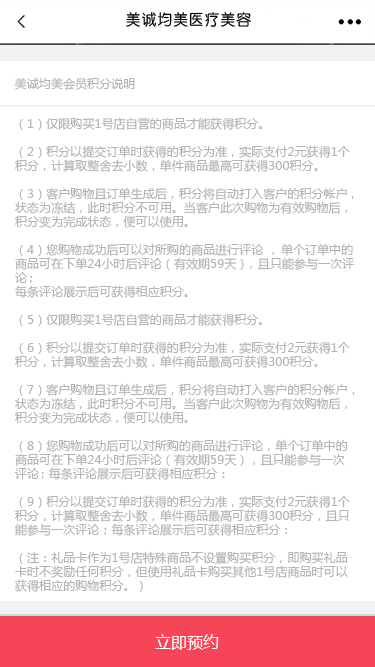
<style>
.page{position:relative;width:375px;height:667px;background:#ffffff}
.page>*{position:absolute;margin:0}
.t1{font:12px "MicrosoftYaHei";letter-spacing:0.005em;color:#b4b4b4}
.t2{font:12px/14px "MicrosoftYaHei";letter-spacing:0.005em;color:#b4b4b4}
.t3{font:16px "MicrosoftYaHei";letter-spacing:0.005em;color:#ffffff}
</style>
<div class="page">
<p class="t1" style="left:14px;top:78px;width:121px;height:12px">美诚均美会员积分说明</p>
<p class="t2" style="left:15px;top:117px;width:340px;height:475px">（1）仅限购买1号店自营的商品才能获得积分。<br> <br>（2）积分以提交订单时获得的积分为准，实际支付2元获得1个<br>积分，计算取整舍去小数，单件商品最高可获得300积分。  <br> <br>（3）客户购物且订单生成后，积分将自动打入客户的积分帐户，<br>状态为冻结，此时积分不可用。当客户此次购物为有效购物后，<br>积分变为完成状态，便可以使用。 <br> <br>（4）您购物成功后可以对所购的商品进行评论，单个订单中的<br>商品可在下单24小时后评论（有效期59天），且只能参与一次评<br>论；<br>每条评论展示后可获得相应积分。<br> <br>（5）仅限购买1号店自营的商品才能获得积分。<br> <br>（6）积分以提交订单时获得的积分为准，实际支付2元获得1个<br>积分，计算取整舍去小数，单件商品最高可获得300积分。  <br><br>（7）客户购物且订单生成后，积分将自动打入客户的积分帐户，<br>状态为冻结，此时积分不可用。当客户此次购物为有效购物后，<br>积分变为完成状态，便可以使用。 <br> <br>（8）您购物成功后可以对所购的商品进行评论，单个订单中的<br>商品可在下单24小时后评论（有效期59天），且只能参与一次<br>评论；每条评论展示后可获得相应积分：<br> <br>（9）积分以提交订单时获得的积分为准，实际支付2元获得1个<br>积分，计算取整舍去小数，单件商品最高可获得300积分，且只<br>能参与一次评论；每条评论展示后可获得相应积分：<br> <br>（注：礼品卡作为1号店特殊商品不设置购买积分，即购买礼品<br>卡时不奖励任何积分，但使用礼品卡购买其他1号店商品时可以<br>获得相应的购物积分。）</p>
<p class="t3" style="left:155px;top:634px;width:64px;height:16px">立即预约</p>
</div>
